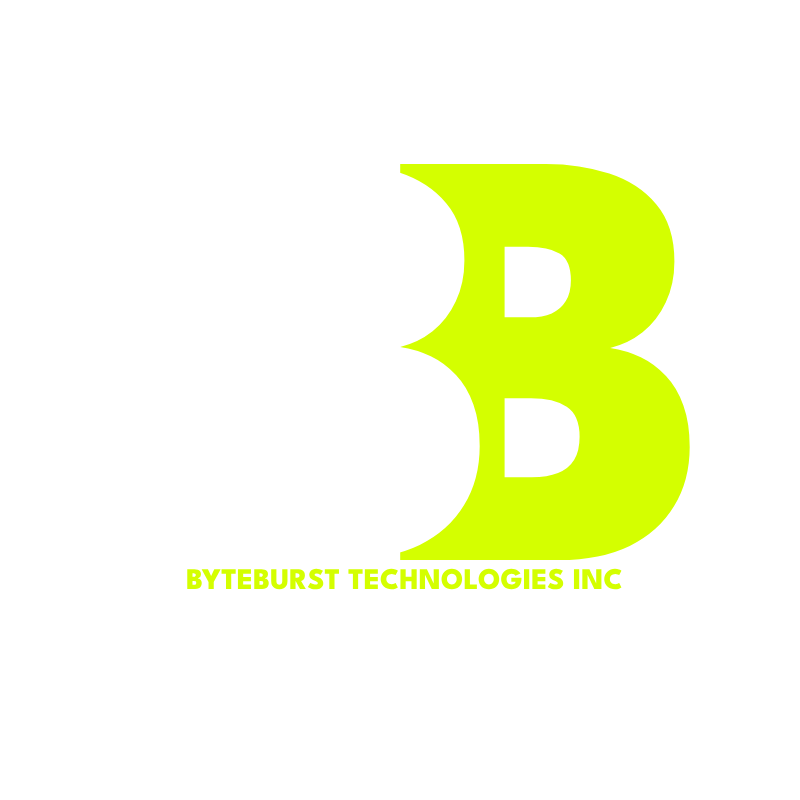
<style>
.page{position:relative;width:800px;height:800px;background:#ffffff}
.page>*{position:absolute;margin:0}
.t1{font:600px "LeagueSpartan-ExtraBold";color:#ffffff}
.t2{font:600px "LeagueSpartan-ExtraBold";color:#d4ff00}
.t3{font:30px "LeagueSpartan-ExtraBold";color:#d4ff00}
</style>
<div class="page">
<p class="t1" style="left:190px;top:163px;width:290px;height:396px">B</p>
<p class="t2" style="left:400px;top:164px;width:290px;height:396px">B</p>
<p class="t3" style="left:187px;top:568px;width:435px;height:22px">BYTEBURST TECHNOLOGIES INC</p>
</div>
